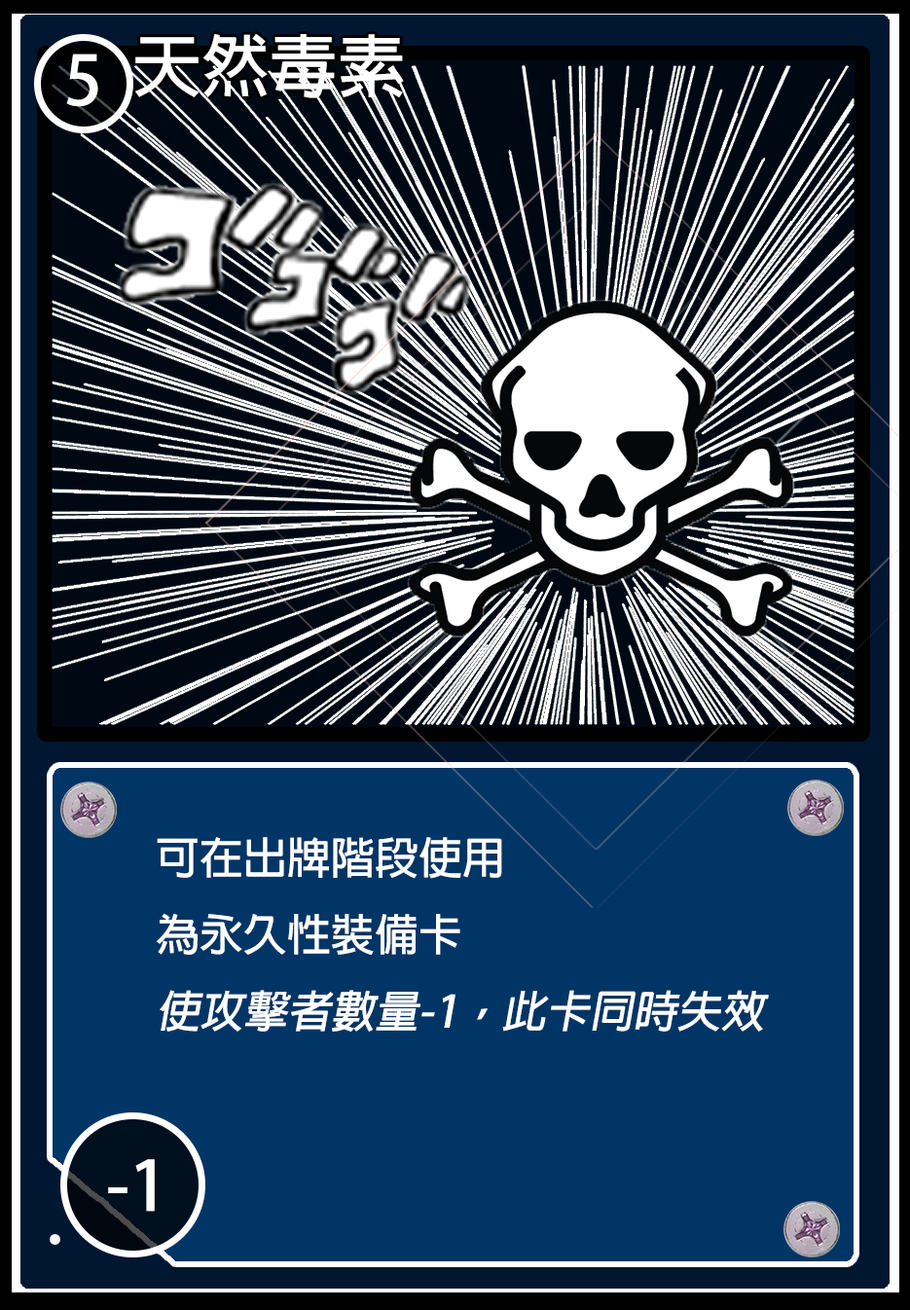
<style>
.page{position:relative;width:910px;height:1310px;background:#003566}
.page>*{position:absolute;margin:0}
.t1{font:68.1px "AdobeFanHeitiStd-Bold";color:#ffffff}
.t2{font:67.8px "AdobeFanHeitiStd-Bold";color:#ffffff}
.t3{font:43.8px "AdobeFanHeitiStd-Bold";color:#ffffff}
.t4{font:43.8px "AdobeFanHeitiStd-Bold";color:#ffffff;font-style:italic}
</style>
<div class="page">
<p class="t1" style="left:135px;top:34px;width:269px;height:64px">天然毒素</p>
<p class="t2" style="left:66px;top:54px;width:32px;height:53px">5</p>
<p class="t3" style="left:157px;top:837px;width:612px;height:195px">可在出牌階段使用<br>為永久性裝備卡<br><span class="t4">使攻擊者數量-1，此卡同時失效</span></p>
<p class="t1" style="left:108px;top:1159px;width:47px;height:53px">-1</p>
</div>
